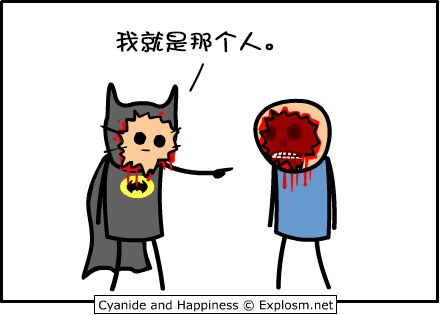
<style>
.page{position:relative;width:440px;height:315px;background:#ffffff}
.page>*{position:absolute;margin:0}
.t1{font:24px "DFShaoNvW5";color:#000000;font-weight:bold}
</style>
<div class="page">
<p class="t1" style="left:116px;top:30px;width:158px;height:23px">我就是那个人。</p>
</div>
